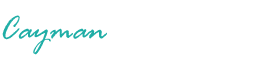
<style>
.page{position:relative;width:280px;height:70px;background:#ffffff}
.page>*{position:absolute;margin:0}
.t1{font:36px "RageItalic";color:#1faea6}
</style>
<div class="page">
<p class="t1" style="left:2px;top:15px;width:105px;height:40px">Cayman</p>
</div>
